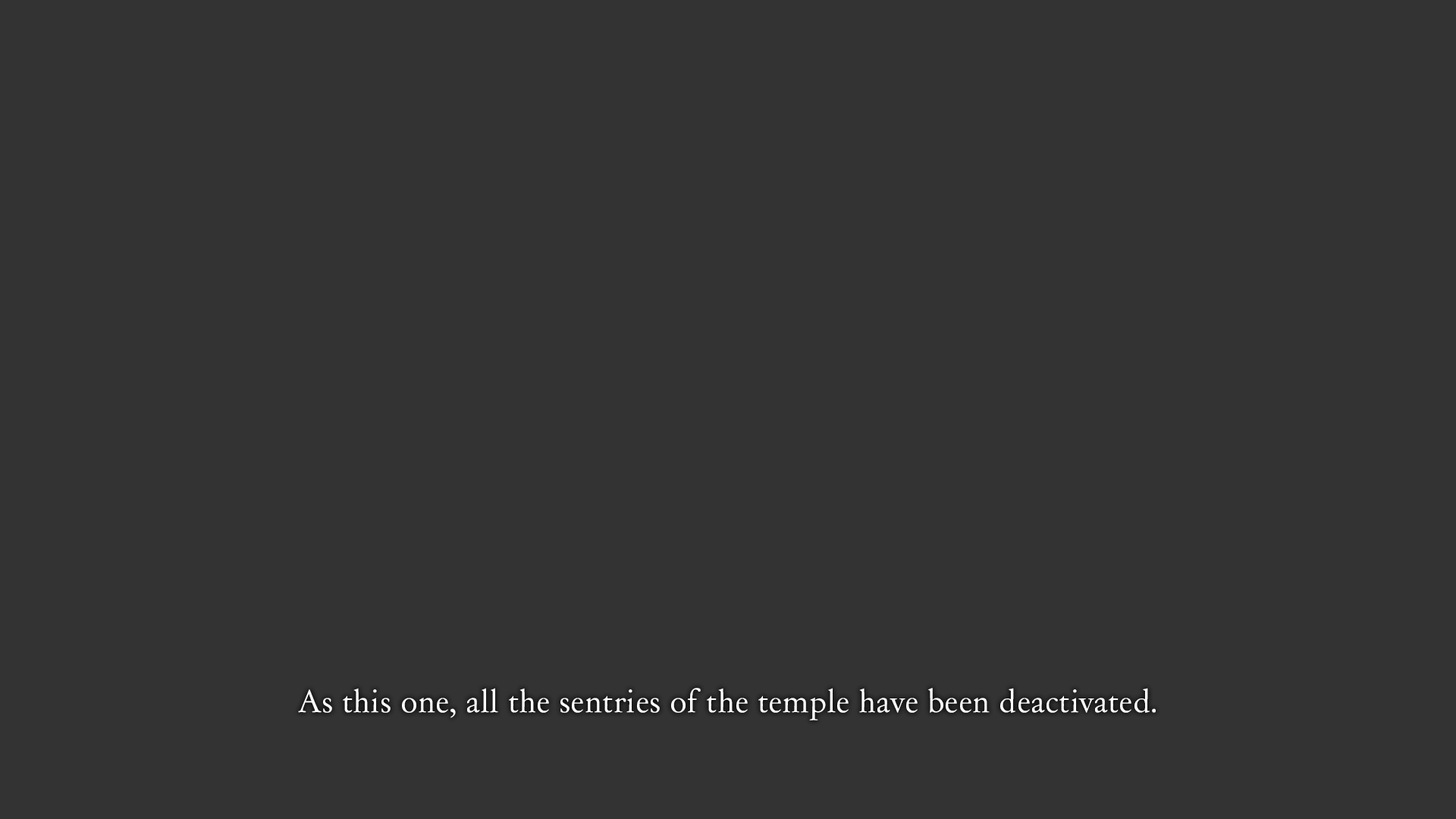
<style>
.page{position:relative;width:1456px;height:819px;background:#333333}
.page>*{position:absolute;margin:0}
.t1{font:30.3px "DayRoman";color:#ffffff}
</style>
<div class="page">
<p class="t1" style="left:298px;top:688px;width:858px;height:32px">As this one, all the sentries of the temple have been deactivated.</p>
</div>
